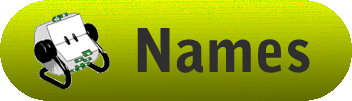
<style>
.page{position:relative;width:352px;height:101px}
.page>*{position:absolute;margin:0}
.t1{font:60px "BellGothicStd-Black";color:#302f2f}
</style>
<div class="page">
<p class="t1" style="left:137px;top:28px;width:173px;height:45px">Names</p>
</div>
